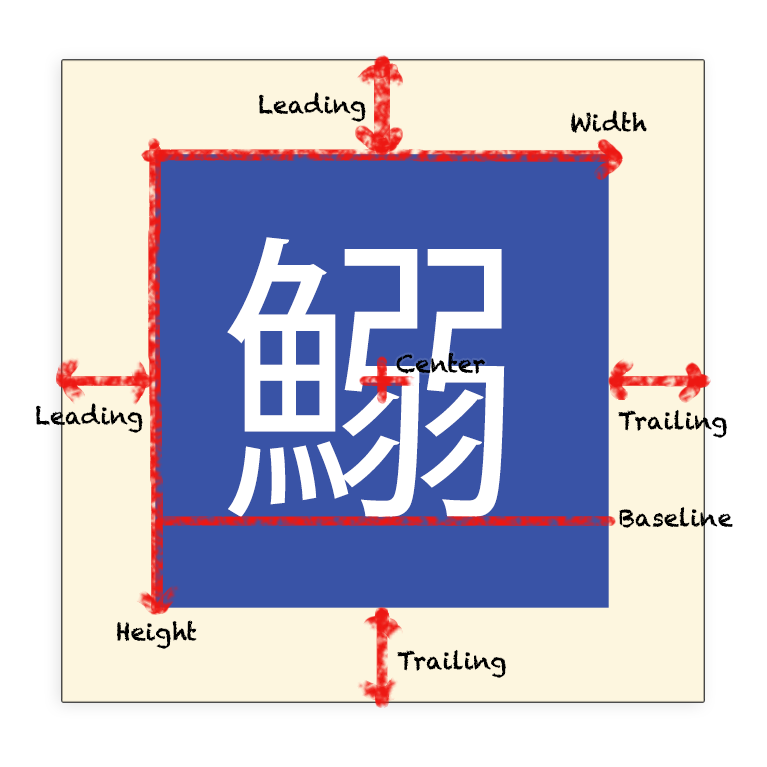
<style>
.page{position:relative;width:767px;height:767px;background:#fdf6df}
.page>*{position:absolute;margin:0}
.t1{font:24px "Chalkduster";color:#000000}
.t2{font:300px "KozGoPr6N-Regular";color:#ffffff}
</style>
<div class="page">
<p class="t1" style="left:259px;top:92px;width:107px;height:30px">Leading</p>
<p class="t1" style="left:570px;top:110px;width:77px;height:23px">Width</p>
<p class="t2" style="left:227px;top:237px;width:278px;height:280px">鰯</p>
<p class="t1" style="left:396px;top:352px;width:89px;height:22px">Center</p>
<p class="t1" style="left:36px;top:403px;width:107px;height:30px">Leading</p>
<p class="t1" style="left:618px;top:409px;width:109px;height:29px">Trailing</p>
<p class="t1" style="left:619px;top:506px;width:114px;height:22px">Baseline</p>
<p class="t1" style="left:117px;top:620px;width:80px;height:29px">Height</p>
<p class="t1" style="left:397px;top:649px;width:109px;height:29px">Trailing</p>
</div>
